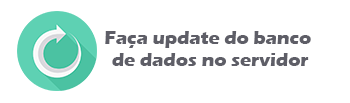
<style>
.page{position:relative;width:350px;height:103px;background:#ffffff}
.page>*{position:absolute;margin:0}
.t1{font:18.7px "ErasITC-Bold";color:#5e5e67}
</style>
<div class="page">
<p class="t1" style="left:105px;top:31px;width:206px;height:35px;text-align:center">Faça update do banco <br>de dados no servidor</p>
</div>
